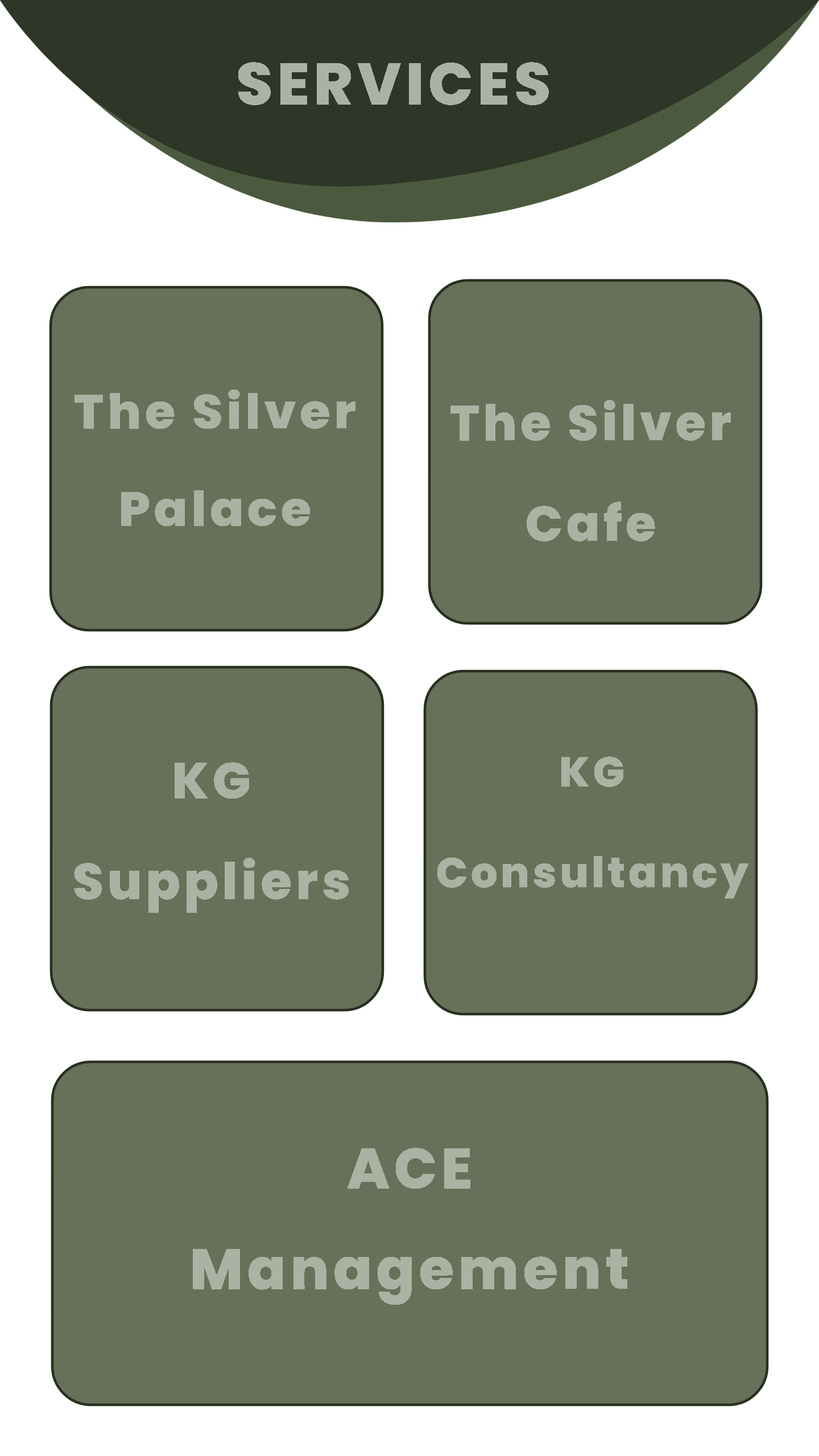
<style>
.page{position:relative;width:819px;height:1456px;background:#677159}
.page>*{position:absolute;margin:0}
.t1{font:59.1px "Poppins-ExtraBold";letter-spacing:0.073em;color:#acb2a3}
.t2{font:47.8px/97.3px "Poppins-ExtraBold";letter-spacing:0.073em;color:#acb2a3;scale:1.03 1}
.t3{font:49.5px/100.7px "Poppins-ExtraBold";letter-spacing:0.073em;color:#acb2a3}
.t4{font:42.1px/100.7px "Poppins-ExtraBold";letter-spacing:0.073em;color:#acb2a3}
.t5{font:50.6px/100.7px "Poppins-ExtraBold";letter-spacing:0.073em;color:#acb2a3}
.t6{font:56.9px/100.7px "Poppins-ExtraBold";letter-spacing:0.073em;color:#acb2a3}
</style>
<div class="page">
<p class="t1" style="left:238px;top:62px;width:311px;height:43px">SERVICES</p>
<p class="t2" style="left:75px;top:389px;width:280px;height:138px;text-align:center">The Silver Palace</p>
<p class="t3" style="left:450px;top:400px;width:281px;height:141px;text-align:center">The Silver Cafe</p>
<p class="t4" style="left:437px;top:756px;width:311px;height:143px;text-align:center">KG Consultancy</p>
<p class="t5" style="left:74px;top:762px;width:275px;height:151px;text-align:center">KG Suppliers</p>
<p class="t6" style="left:193px;top:1148px;width:435px;height:157px;text-align:center">ACE Management</p>
</div>
